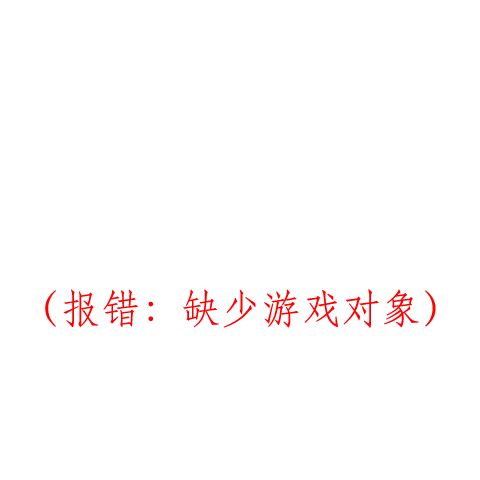
<style>
.page{position:relative;width:480px;height:480px;background:#ffffff}
.page>*{position:absolute;margin:0}
.t1{font:40.1px "STFangsong";color:#ff0000}
</style>
<div class="page">
<p class="t1" style="left:45px;top:289px;width:391px;height:39px">（报错：缺少游戏对象）</p>
</div>
